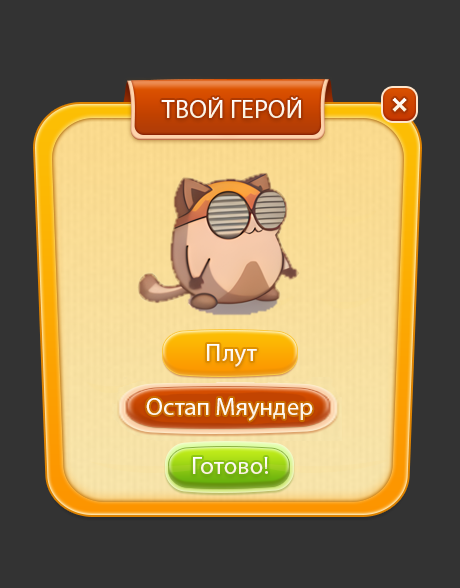
<style>
.page{position:relative;width:460px;height:588px;background:#333333}
.page>*{position:absolute;margin:0}
.t1{font:26px "MyriadPro-Regular";color:#ffffff}
.t2{font:25px "MyriadPro-Regular";color:#ffffff}
.t3{font:25px "MyriadPro-Regular";color:#fdf6e8}
</style>
<div class="page">
<p class="t1" style="left:161px;top:97px;width:140px;height:21px">ТВОЙ ГЕРОЙ</p>
<p class="t2" style="left:207px;top:344px;width:50px;height:23px">Плут</p>
<p class="t2" style="left:146px;top:398px;width:167px;height:23px">Остап Мяундер</p>
<p class="t3" style="left:193px;top:457px;width:75px;height:17px">Готово!</p>
</div>
